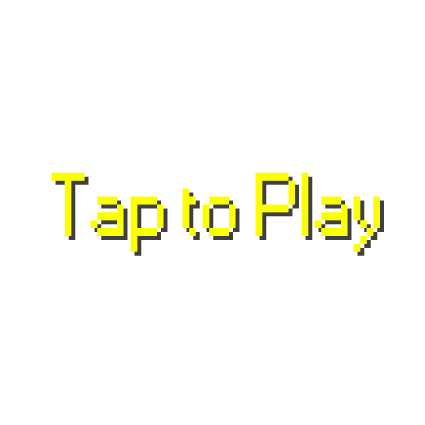
<style>
.page{position:relative;width:425px;height:425px;background:#ffffff}
.page>*{position:absolute;margin:0}
.t1{font:84.2px "Small Fonts";color:#fcff00}
.t2{font:84.2px "Small Fonts"}
</style>
<div class="page">
<p class="t1" style="left:51px;top:172px;width:329px;height:80px">Tap to Play</p>
<p class="t2" style="left:55px;top:176px;width:329px;height:80px">Tap to Play</p>
</div>
